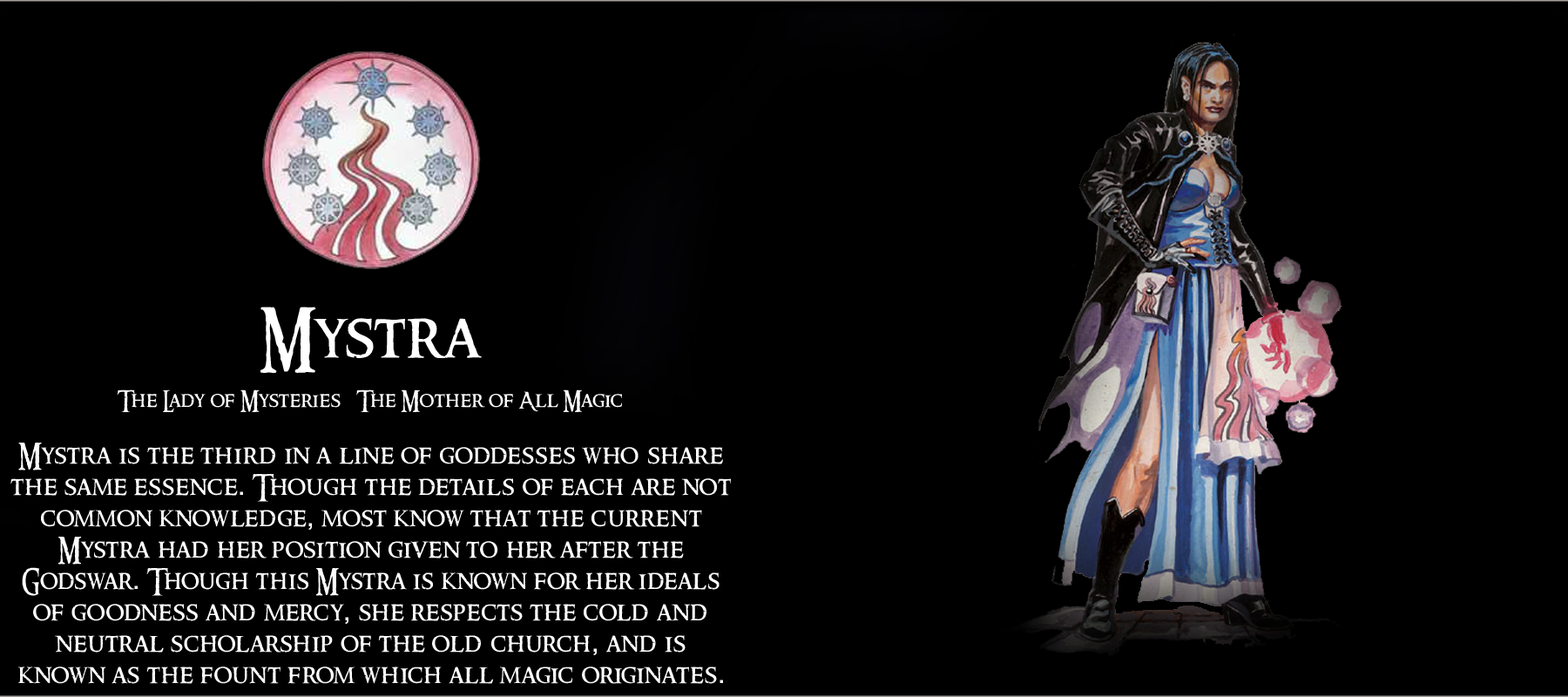
<style>
.page{position:relative;width:1568px;height:697px;background:#000000}
.page>*{position:absolute;margin:0}
.t1{font:26.1px "RingbearerMedium";letter-spacing:0.025em;color:#ffffff}
.t2{font:62.7px "RingbearerMedium";letter-spacing:0.025em;color:#ffffff}
.t3{font:20.9px "RingbearerMedium";letter-spacing:0.025em;color:#ffffff}
.t4{font:26.1px "Rockwell";letter-spacing:0.025em;color:#ffffff}
</style>
<div class="page">
<p class="t1" style="left:10px;top:307px;width:721px;height:377px;text-align:center"><span class="t2">Mystra<br></span><span class="t3"><br>The Lady of Mysteries   The Mother of All Magic<br><br></span>Mystra is the third in a line of goddesses who share the same essence<span class="t4">.</span> Though the details of each are not common knowledge<span class="t4">,</span> most know that the current <br>Mystra had her position given to her after the <br>Godswar<span class="t4">.</span> Though this Mystra is known for her ideals <br>of goodness and mercy<span class="t4">,</span> she respects the cold and <br>neutral scholarship of the old church<span class="t4">,</span> and is <br>known as the fount from which all magic originates<span class="t4">.</span></p>
</div>
